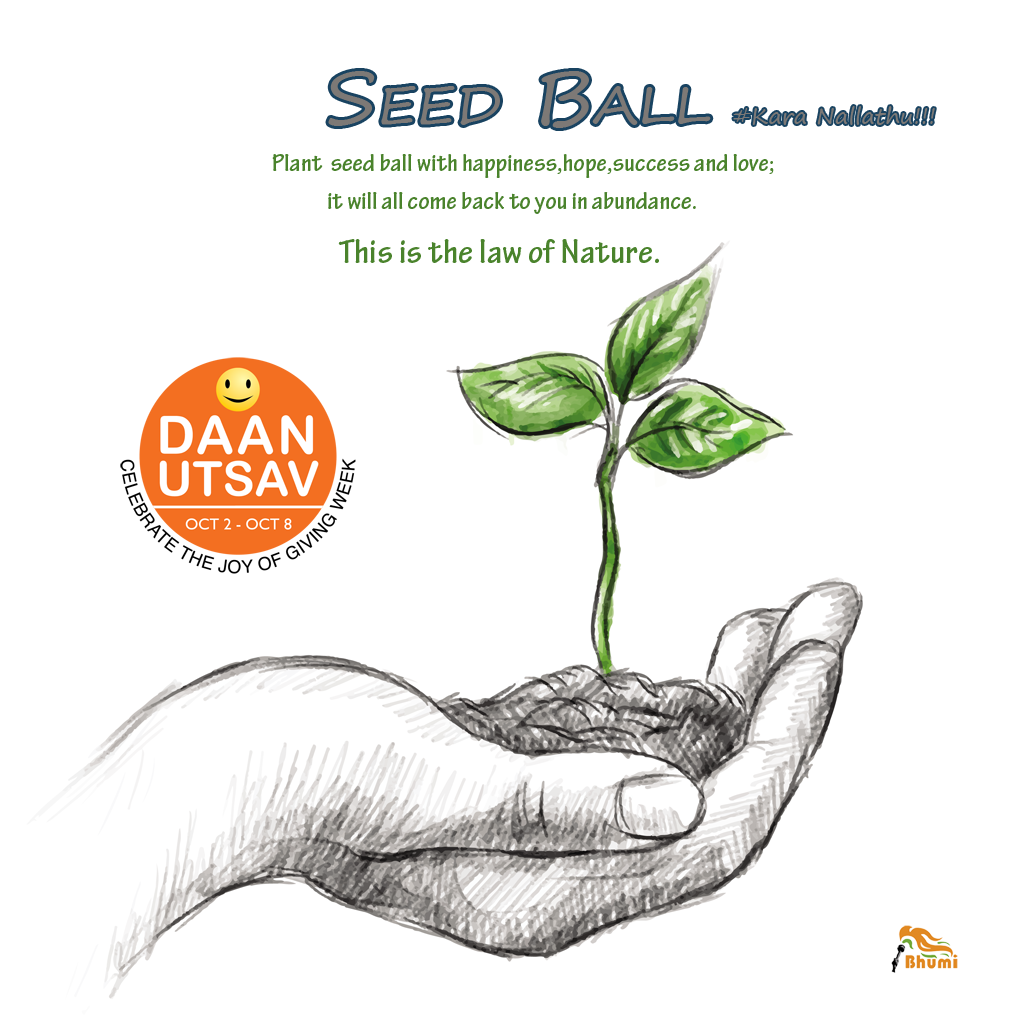
<style>
.page{position:relative;width:1024px;height:1024px;background:#ffffff}
.page>*{position:absolute;margin:0}
.t1{font:51.2px "SegoePrint";color:#7d7976;scale:1.12 1}
.t2{font:71.7px "SegoePrint";color:#7d7976;scale:1.12 1}
.t3{font:22px "SegoePrint";color:#7d7976;scale:1.04 1}
.t4{font:25.6px "TektonPro-BoldCond";color:#4a832c;scale:1.12 1}
.t5{font:35.8px "TektonPro-BoldCond";color:#4a832c;scale:1.12 1}
</style>
<div class="page">
<p class="t1" style="left:328px;top:71px;width:383px;height:57px"><span class="t2">S</span>EED<span class="t2"> B</span>ALL</p>
<p class="t3" style="left:733px;top:106px;width:202px;height:19px">#Kara Nallathu!!!</p>
<p class="t4" style="left:272px;top:154px;width:502px;height:109px">Plant  seed ball with happiness,hope,success and love;<br>     it will all come back to you in abundance.<br>      <span class="t5">This is the law of Nature.</span></p>
</div>
